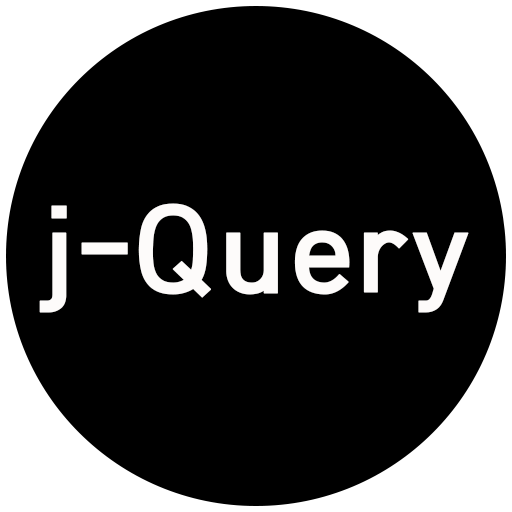
<style>
.page{position:relative;width:512px;height:512px;background:#000000}
.page>*{position:absolute;margin:0}
.t1{font:118.2px "HCRDotum-Bold";letter-spacing:-0.01em;color:#fdfbfa;font-weight:bold}
</style>
<div class="page">
<p class="t1" style="left:39px;top:203px;width:430px;height:110px">j-Query</p>
</div>
